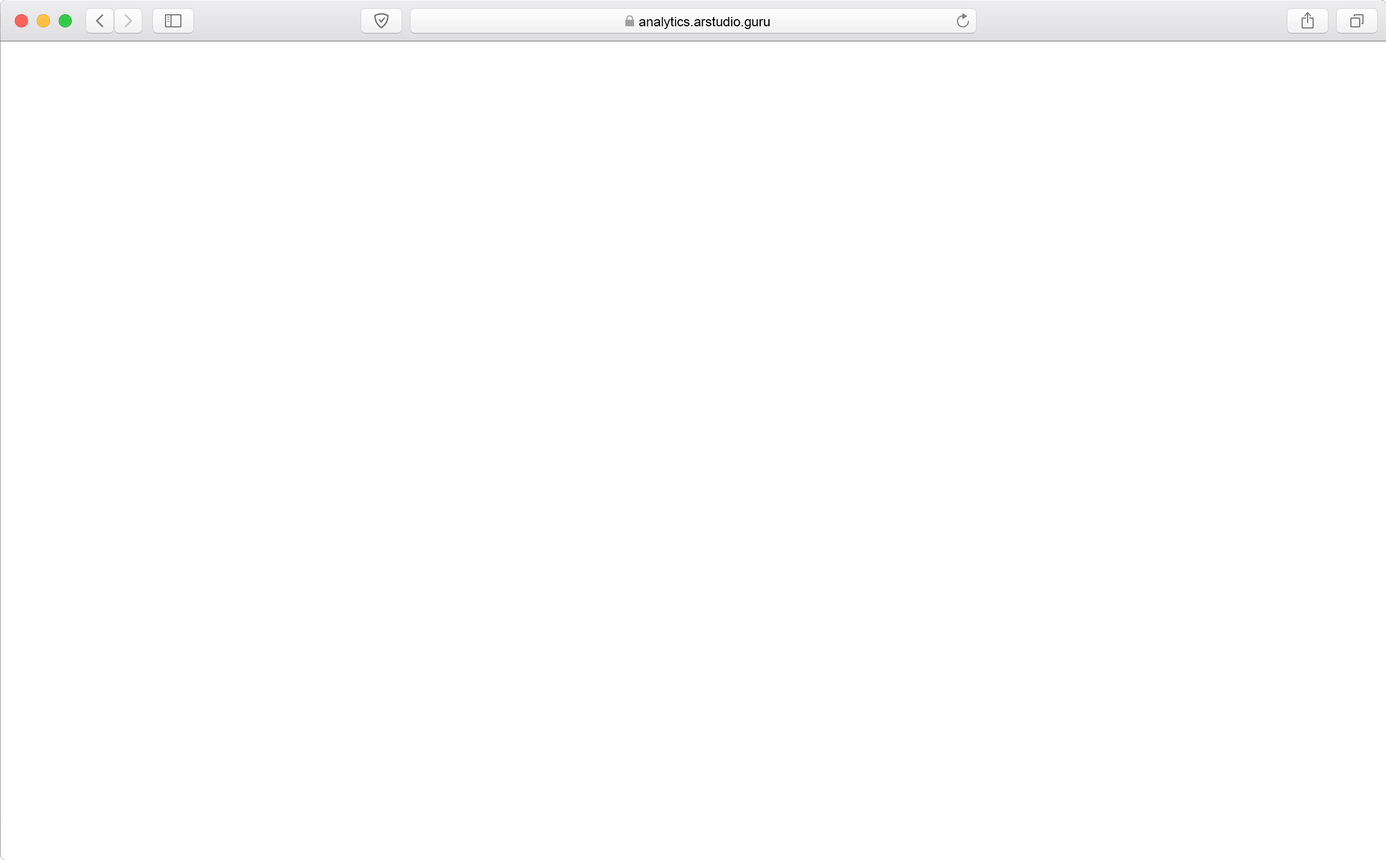
<style>
.page{position:relative;width:1386px;height:860px;background:#ffffff}
.page>*{position:absolute;margin:0}
.t1{font:13.2px "ArialMT";color:#000000}
</style>
<div class="page">
<p class="t1" style="left:639px;top:16px;width:131px;height:13px">analytics.arstudio.guru</p>
</div>
